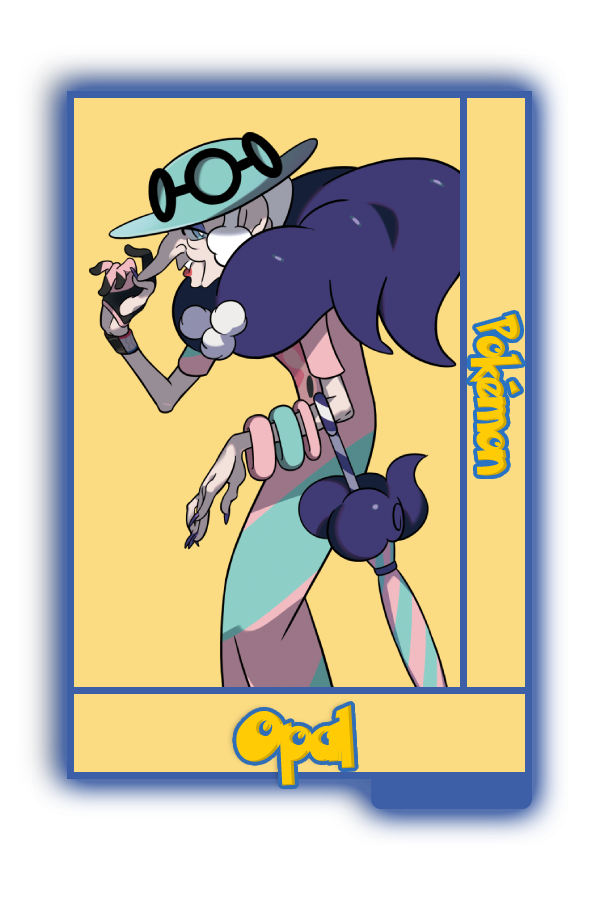
<style>
.page{position:relative;width:600px;height:900px;background:#fbdc83}
.page>*{position:absolute;margin:0}
.t1{font:48.8px "PokemonSolidNormal";color:#ffcb05;scale:0.8 1}
.t2{font:60.1px "PokemonSolidNormal";color:#ffcb05;scale:0.96 1}
</style>
<div class="page">
<p class="t1" style="left:469px;top:313px;width:54px;height:163px;rotate:90deg">Pokémon</p>
<p class="t2" style="left:236px;top:704px;width:119px;height:82px">Opal</p>
</div>
